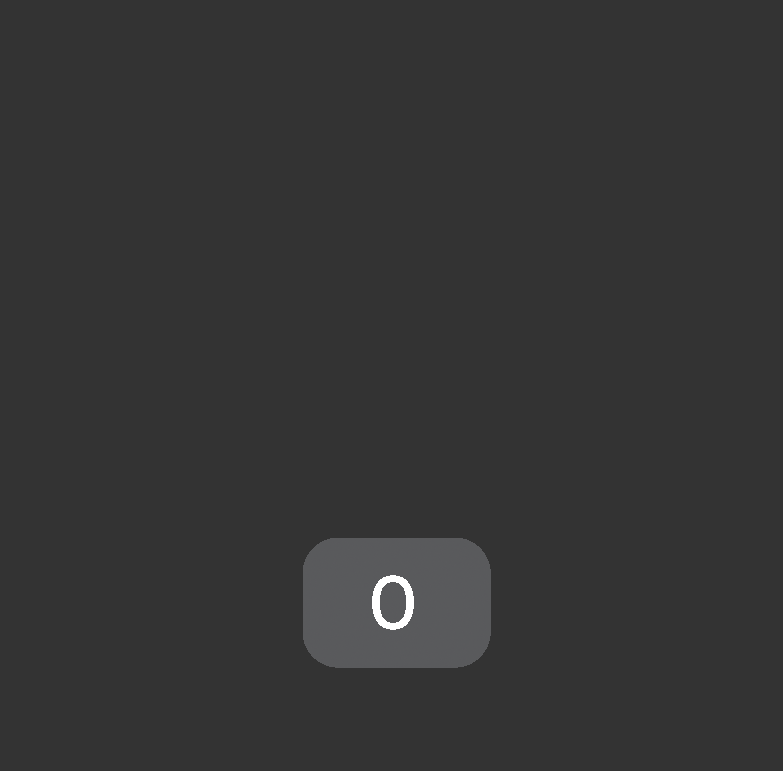
<style>
.page{position:relative;width:783px;height:771px;background:#333333}
.page>*{position:absolute;margin:0}
.t1{font:82.1px "Circular-Std-Book";color:#ffffff}
</style>
<div class="page">
<p class="t1" style="left:372px;top:575px;width:42px;height:55px">0</p>
</div>
